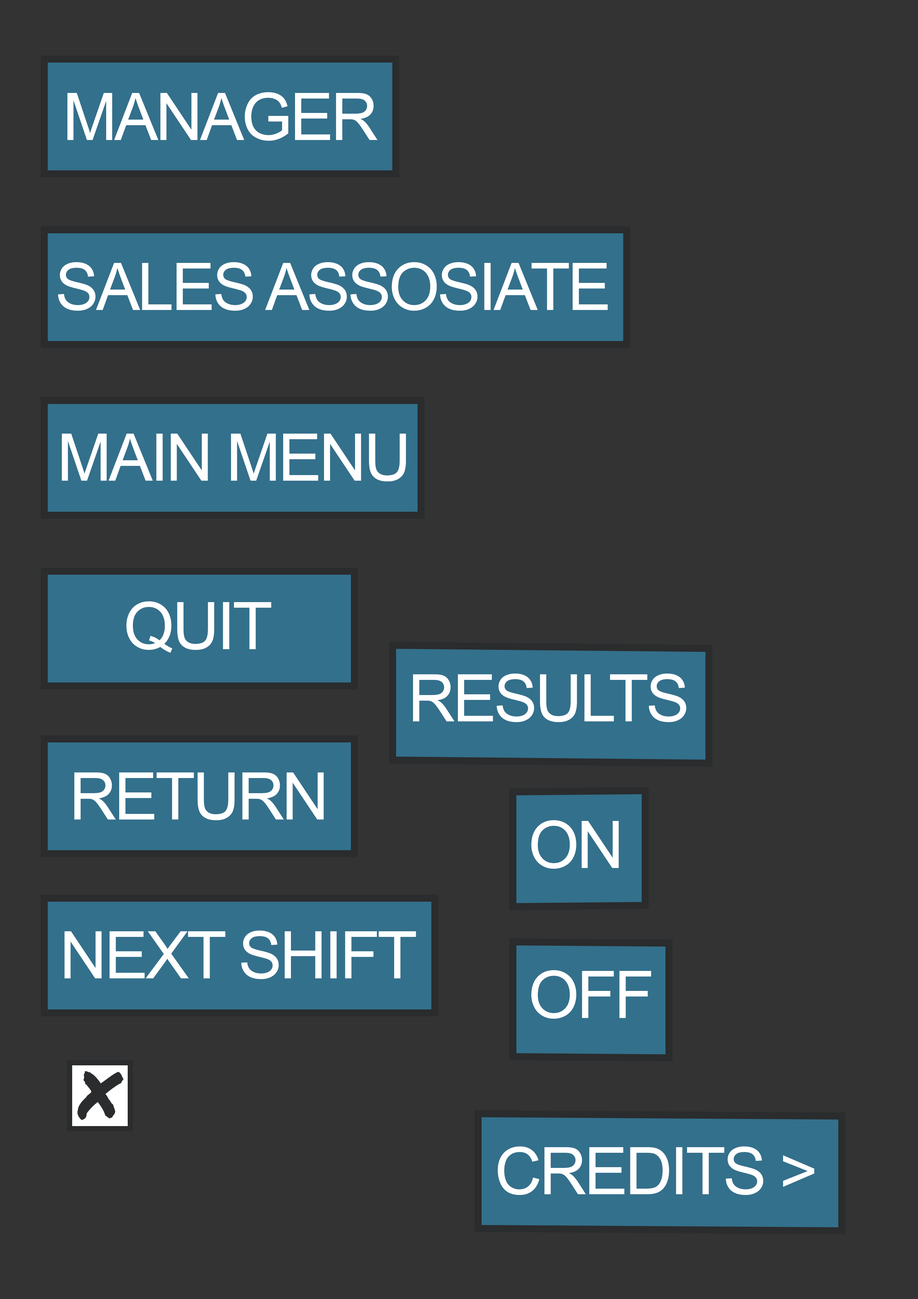
<style>
.page{position:relative;width:918px;height:1299px;background:#333333}
.page>*{position:absolute;margin:0}
.t1{font:65.6px "ArialMT";letter-spacing:-0.04em;color:#ffffff}
.t2{font:65.6px "PermanentMarker-Regular";letter-spacing:-0.04em;color:#2a2c2d}
</style>
<div class="page">
<p class="t1" style="left:67px;top:92px;width:311px;height:49px">MANAGER</p>
<p class="t1" style="left:58px;top:262px;width:550px;height:49px">SALES ASSOSIATE</p>
<p class="t1" style="left:62px;top:434px;width:344px;height:47px">MAIN MENU</p>
<p class="t1" style="left:126px;top:601px;width:145px;height:52px">QUIT</p>
<p class="t1" style="left:413px;top:673px;width:273px;height:49px">RESULTS</p>
<p class="t1" style="left:74px;top:772px;width:250px;height:48px">RETURN</p>
<p class="t1" style="left:531px;top:820px;width:88px;height:49px">ON</p>
<p class="t1" style="left:64px;top:930px;width:352px;height:49px">NEXT SHIFT</p>
<p class="t1" style="left:531px;top:970px;width:120px;height:48px">OFF</p>
<p class="t2" style="left:77px;top:1071px;width:47px;height:49px">X</p>
<p class="t1" style="left:498px;top:1146px;width:316px;height:49px">CREDITS &gt;</p>
</div>
